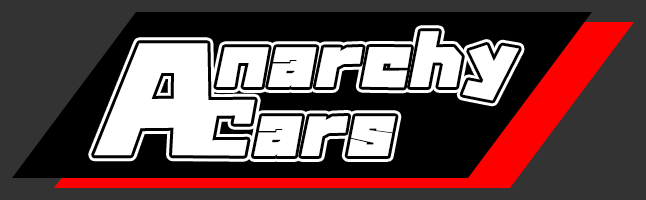
<style>
.page{position:relative;width:646px;height:200px;background:#000000}
.page>*{position:absolute;margin:0}
.t1{font:60px "GN-KMBFont-UB-OldstyleKana";letter-spacing:0.05em;color:#ffffff;font-style:italic;scale:1.1 1}
</style>
<div class="page">
<p class="t1" style="left:216px;top:31px;width:303px;height:70px">narchy</p>
<p class="t1" style="left:254px;top:116px;width:142px;height:40px">ars</p>
</div>
